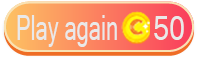
<style>
.page{position:relative;width:198px;height:59px}
.page>*{position:absolute;margin:0}
.t1{font:33.7px "MicrosoftSansSerif";color:#e9e9e9;scale:0.65 1}
.t2{font:33.4px "MicrosoftSansSerif";color:#e9e9e9;scale:0.87 1}
</style>
<div class="page">
<p class="t1" style="left:17px;top:15px;width:100px;height:32px">Play again</p>
<p class="t2" style="left:154px;top:16px;width:30px;height:24px">50</p>
</div>
